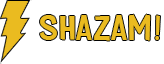
<style>
.page{position:relative;width:164px;height:64px;background:#ffffff}
.page>*{position:absolute;margin:0}
.t1{font:44px "SimplyOlive-Regular";letter-spacing:0.02em;color:#eabb20}
</style>
<div class="page">
<p class="t1" style="left:40px;top:14px;width:120px;height:27px">SHAZAM!</p>
</div>
